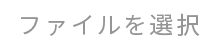
<style>
.page{position:relative;width:220px;height:50px;background:#ffffff}
.page>*{position:absolute;margin:0}
.t1{font:24px "NotoSansJP-Regular";letter-spacing:0.1em;color:#959595}
</style>
<div class="page">
<p class="t1" style="left:21px;top:13px;width:179px;height:23px">ファイルを選択</p>
</div>
